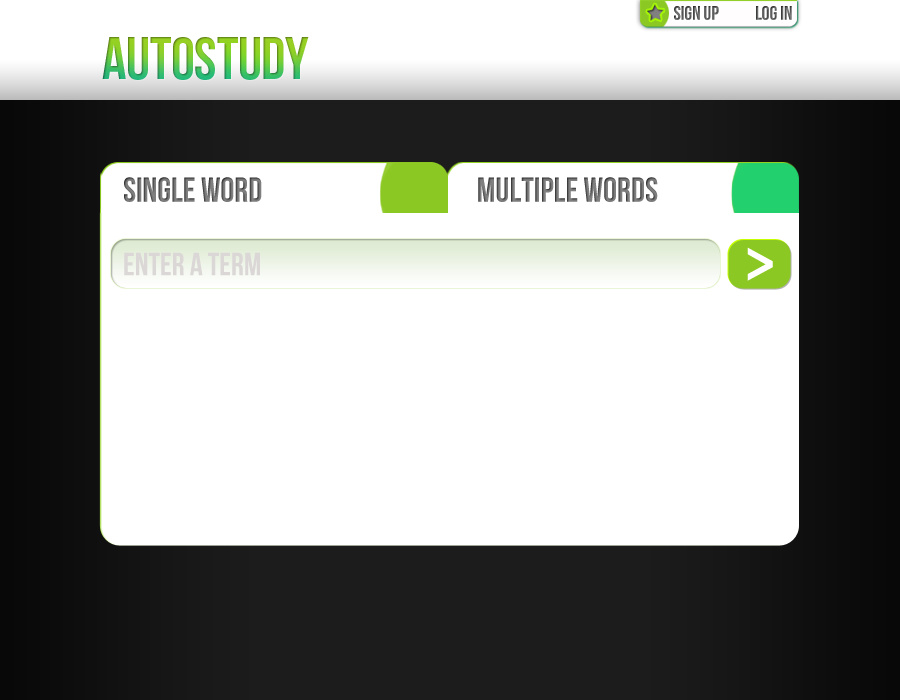
<style>
.page{position:relative;width:900px;height:700px;background:#ffffff}
.page>*{position:absolute;margin:0}
.t1{font:19.6px "BebasNeue"}
.t2{font:60px "BebasNeue";letter-spacing:-0.005em}
.t3{font:34.8px "BebasNeue";color:#808080}
.t4{font:32.1px "BebasNeue";color:#dbd7d7}
.t5{font:60px "Helvetica-Condensed-Bold";color:#ffffff}
</style>
<div class="page">
<p class="t1" style="left:674px;top:6px;width:118px;height:14px">sign up            log in</p>
<p class="t2" style="left:102px;top:37px;width:207px;height:43px">AutoStudy</p>
<p class="t3" style="left:124px;top:177px;width:138px;height:25px">single word</p>
<p class="t3" style="left:478px;top:177px;width:180px;height:25px">multiple words</p>
<p class="t4" style="left:124px;top:252px;width:136px;height:24px">enter a term</p>
<p class="t5" style="left:747px;top:247px;width:26px;height:34px">&gt;</p>
</div>
